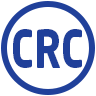
<style>
.page{position:relative;width:96px;height:96px;background:#ffffff}
.page>*{position:absolute;margin:0}
.t1{font:53.1px "NeoTech-Bold";color:#20409a;scale:0.76 1}
</style>
<div class="page">
<p class="t1" style="left:13px;top:29px;width:69px;height:39px">CRC</p>
</div>
